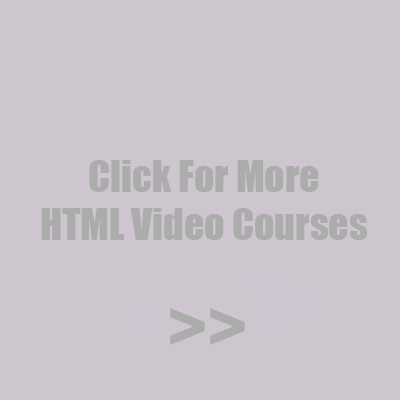
<style>
.page{position:relative;width:400px;height:400px;background:#cdc6cf}
.page>*{position:absolute;margin:0}
.t1{font:40px "Impact";color:#acacac}
.t2{font:74px "Impact";color:#acacac}
.t3{font:93px "Impact";color:#cdc5cf}
.t4{font:136px "Impact";color:#cdc5cf}
</style>
<div class="page">
<p class="t1" style="left:41px;top:160px;width:327px;height:80px;text-align:center">Click For More<br>HTML Video Courses</p>
<p class="t2" style="left:121px;top:268px;width:195px;height:77px"><span class="t3">&gt;</span>&gt;&gt;<span class="t4">&gt;</span></p>
</div>
